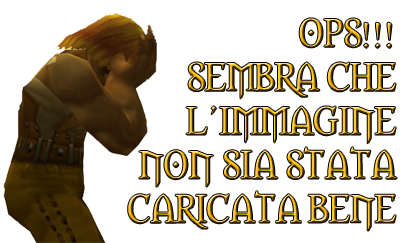
<style>
.page{position:relative;width:400px;height:243px;background:#ffffff}
.page>*{position:absolute;margin:0}
.t1{font:36.6px "Morpheus"}
</style>
<div class="page">
<p class="t1" style="left:128px;top:18px;width:269px;height:213px;text-align:right">OPS!!!<br>SEMBRA CHE<br>L’IMMAGINE<br>NON SIA STATA<br>CARICATA BENE</p>
</div>
